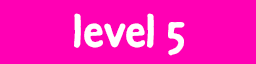
<style>
.page{position:relative;width:256px;height:64px;background:#ff00b4}
.page>*{position:absolute;margin:0}
.t1{font:48px "DuperPro-Bold";color:#ffffff}
</style>
<div class="page">
<p class="t1" style="left:74px;top:13px;width:111px;height:43px">level 5</p>
</div>
